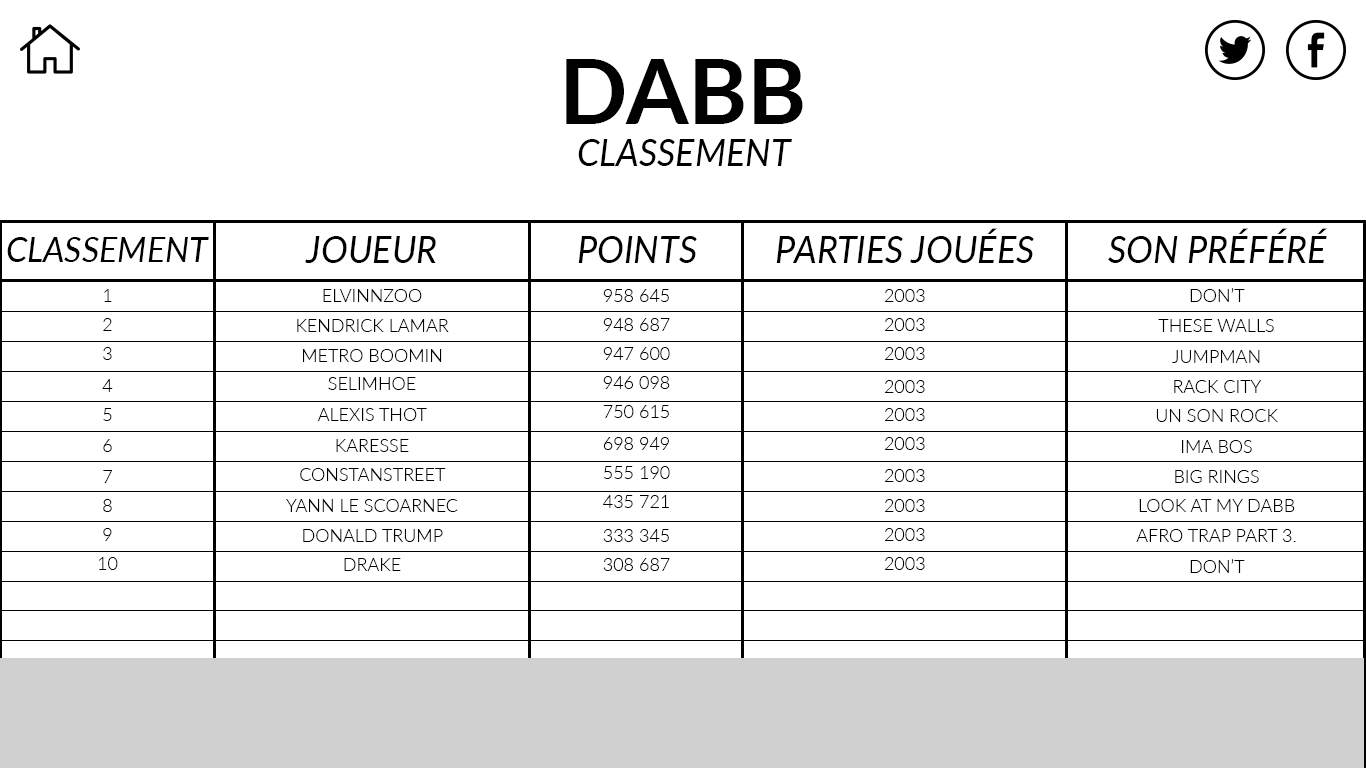
<style>
.page{position:relative;width:1366px;height:768px;background:#ffffff}
.page>*{position:absolute;margin:0}
.t1{font:90px "Lato-Bold";color:#010101}
.t2{font:36px "Lato-Italic";color:#000000}
.t3{font:34px "Lato-Italic";color:#000000}
.t4{font:18px "Lato-Light";color:#000000}
.t5{font:17.3px "Lato-Light";color:#000000;scale:1.04 1}
</style>
<div class="page">
<p class="t1" style="left:566px;top:59px;width:237px;height:65px">DABB</p>
<p class="t2" style="left:578px;top:139px;width:214px;height:27px">CLASSEMENT</p>
<p class="t2" style="left:776px;top:228px;width:258px;height:35px">PARTIES JOUÉES</p>
<p class="t2" style="left:1108px;top:228px;width:219px;height:35px">SON PRÉFÉRÉ</p>
<p class="t3" style="left:7px;top:237px;width:202px;height:25px">CLASSEMENT</p>
<p class="t2" style="left:305px;top:236px;width:131px;height:27px">JOUEUR</p>
<p class="t2" style="left:578px;top:236px;width:119px;height:27px">POINTS</p>
<p class="t4" style="left:104px;top:289px;width:8px;height:13px">1</p>
<p class="t5" style="left:323px;top:289px;width:99px;height:13px">ELVINNZOO</p>
<p class="t4" style="left:603px;top:289px;width:66px;height:13px">958 645</p>
<p class="t4" style="left:884px;top:289px;width:41px;height:13px">2003</p>
<p class="t4" style="left:1190px;top:288px;width:55px;height:14px">DON’T</p>
<p class="t4" style="left:103px;top:318px;width:9px;height:13px">2</p>
<p class="t4" style="left:603px;top:318px;width:67px;height:13px">948 687</p>
<p class="t4" style="left:884px;top:318px;width:41px;height:13px">2003</p>
<p class="t5" style="left:297px;top:319px;width:152px;height:13px">KENDRICK LAMAR</p>
<p class="t4" style="left:1158px;top:319px;width:116px;height:13px">THESE WALLS</p>
<p class="t4" style="left:103px;top:347px;width:9px;height:13px">3</p>
<p class="t5" style="left:303px;top:349px;width:139px;height:13px">METRO BOOMIN</p>
<p class="t4" style="left:603px;top:347px;width:67px;height:13px">947 600</p>
<p class="t4" style="left:884px;top:347px;width:41px;height:13px">2003</p>
<p class="t4" style="left:1172px;top:350px;width:88px;height:13px">JUMPMAN</p>
<p class="t5" style="left:328px;top:377px;width:88px;height:13px">SELIMHOE</p>
<p class="t4" style="left:603px;top:376px;width:67px;height:13px">946 098</p>
<p class="t4" style="left:102px;top:379px;width:11px;height:13px">4</p>
<p class="t4" style="left:884px;top:380px;width:41px;height:13px">2003</p>
<p class="t4" style="left:1174px;top:380px;width:88px;height:13px">RACK CITY</p>
<p class="t4" style="left:103px;top:408px;width:9px;height:13px">5</p>
<p class="t5" style="left:317px;top:408px;width:110px;height:13px">ALEXIS THOT</p>
<p class="t4" style="left:603px;top:405px;width:66px;height:13px">750 615</p>
<p class="t4" style="left:884px;top:408px;width:41px;height:13px">2003</p>
<p class="t4" style="left:1156px;top:409px;width:122px;height:13px">UN SON ROCK</p>
<p class="t4" style="left:603px;top:437px;width:66px;height:13px">698 949</p>
<p class="t4" style="left:884px;top:437px;width:41px;height:13px">2003</p>
<p class="t4" style="left:103px;top:439px;width:9px;height:13px">6</p>
<p class="t5" style="left:336px;top:439px;width:73px;height:13px">KARESSE</p>
<p class="t4" style="left:1182px;top:440px;width:70px;height:13px">IMA BOS</p>
<p class="t4" style="left:103px;top:470px;width:9px;height:13px">7</p>
<p class="t5" style="left:300px;top:468px;width:146px;height:13px">CONSTANSTREET</p>
<p class="t4" style="left:603px;top:466px;width:67px;height:13px">555 190</p>
<p class="t4" style="left:884px;top:469px;width:41px;height:13px">2003</p>
<p class="t4" style="left:1175px;top:470px;width:84px;height:13px">BIG RINGS</p>
<p class="t4" style="left:603px;top:495px;width:66px;height:13px">435 721</p>
<p class="t4" style="left:103px;top:499px;width:9px;height:13px">8</p>
<p class="t5" style="left:286px;top:499px;width:172px;height:13px">YANN LE SCOARNEC</p>
<p class="t4" style="left:884px;top:499px;width:41px;height:13px">2003</p>
<p class="t4" style="left:1139px;top:499px;width:156px;height:13px">LOOK AT MY DABB</p>
<p class="t4" style="left:103px;top:528px;width:9px;height:13px">9</p>
<p class="t5" style="left:303px;top:529px;width:140px;height:13px">DONALD TRUMP</p>
<p class="t4" style="left:603px;top:529px;width:66px;height:13px">333 345</p>
<p class="t4" style="left:884px;top:528px;width:41px;height:13px">2003</p>
<p class="t4" style="left:1136px;top:529px;width:160px;height:13px">AFRO TRAP PART 3.</p>
<p class="t4" style="left:98px;top:557px;width:20px;height:13px">10</p>
<p class="t5" style="left:344px;top:558px;width:57px;height:13px">DRAKE</p>
<p class="t4" style="left:603px;top:558px;width:67px;height:13px">308 687</p>
<p class="t4" style="left:884px;top:557px;width:41px;height:13px">2003</p>
<p class="t4" style="left:1190px;top:559px;width:55px;height:14px">DON’T</p>
</div>
